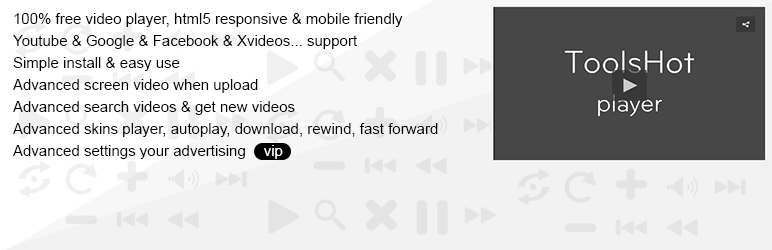
<style>
.page{position:relative;width:772px;height:250px;background:#f2f2f2}
.page>*{position:absolute;margin:0}
.t1{font:15px/22px "ArialMT";color:#000000}
.t2{font:15px "ArialMT";color:#ffffff}
</style>
<div class="page">
<p class="t1" style="left:13px;top:13px;width:425px;height:146px">100% free video player, html5 responsive &amp; mobile friendly<br>Youtube &amp; Google &amp; Facebook &amp; Xvideos... support<br>Simple install &amp; easy use<br>Advanced screen video when upload<br>Advanced search videos &amp; get new videos<br>Advanced skins player, autoplay, download, rewind, fast forward<br>Advanced settings your advertising</p>
<p class="t2" style="left:264px;top:145px;width:19px;height:14px">vip</p>
</div>
